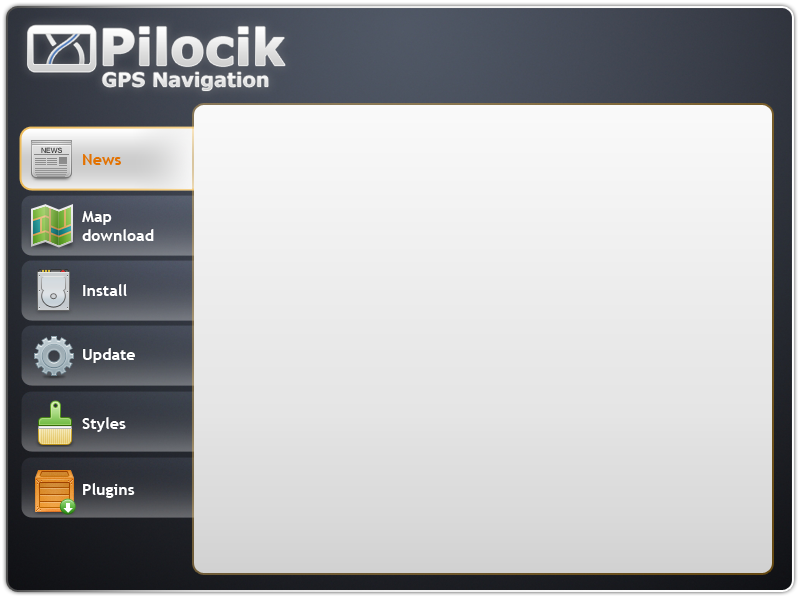
<style>
.page{position:relative;width:800px;height:600px}
.page>*{position:absolute;margin:0}
.t1{font:16px "TrebuchetMS-Bold";color:#e37201}
.t2{font:16px "TrebuchetMS-Bold";color:#ffffff}
</style>
<div class="page">
<p class="t1" style="left:83px;top:154px;width:38px;height:11px">News</p>
<p class="t2" style="left:82px;top:211px;width:72px;height:30px">Map <br>download</p>
<p class="t2" style="left:83px;top:284px;width:44px;height:12px">Install</p>
<p class="t2" style="left:83px;top:348px;width:52px;height:15px">Update</p>
<p class="t2" style="left:82px;top:417px;width:44px;height:15px">Styles</p>
<p class="t2" style="left:83px;top:483px;width:52px;height:15px">Plugins</p>
</div>
